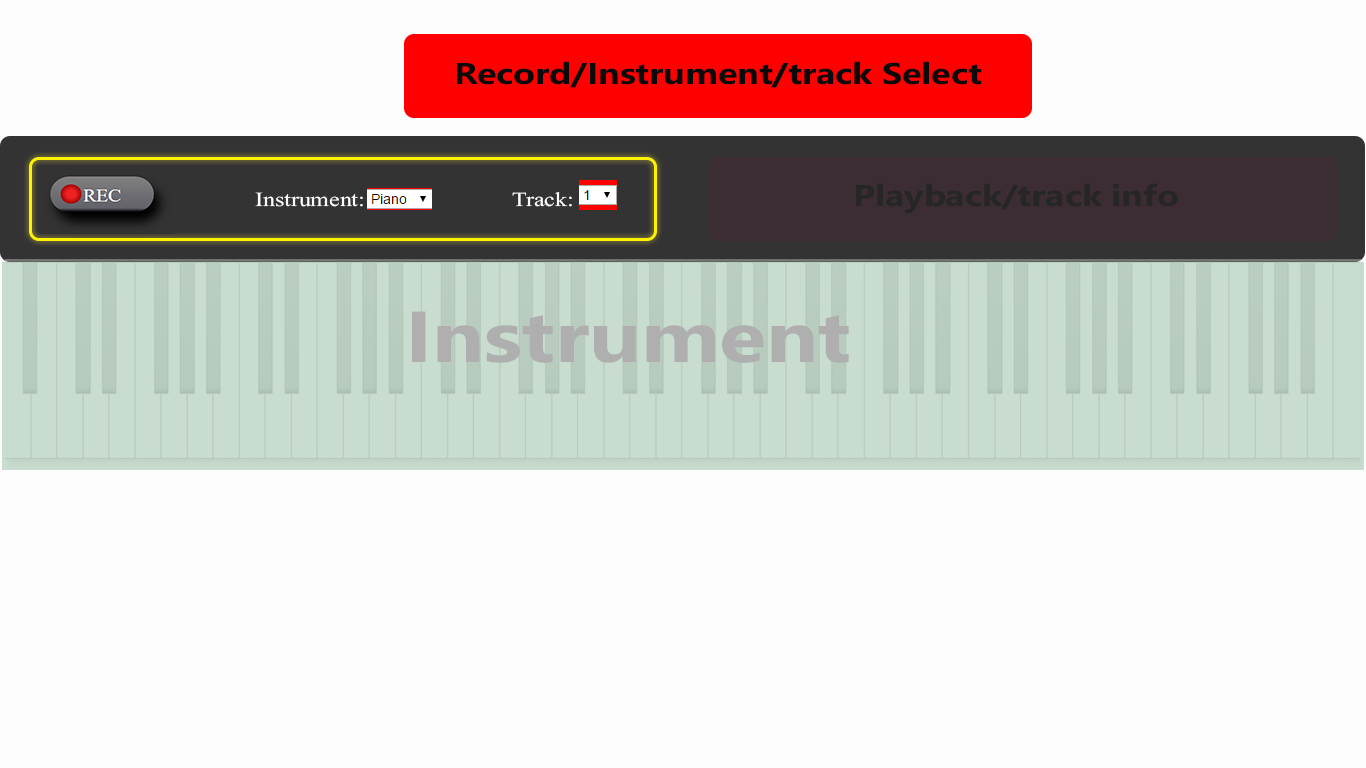
<style>
.page{position:relative;width:1366px;height:768px;background:#fdfdfd}
.page>*{position:absolute;margin:0}
.t1{font:30px "SegoeWP-Bold";letter-spacing:-0.005em;color:#0a0a0a;scale:1.2 1}
.t2{font:30px "SegoeWP-Bold";letter-spacing:-0.005em;color:#262626;scale:1.2 1}
.t3{font:30px "MicrosoftHimalaya";letter-spacing:-0.005em;color:#fffefe;scale:1.2 1}
.t4{font:72px "SegoeWP-Bold";letter-spacing:-0.005em;color:#afafaf;scale:1.2 1}
</style>
<div class="page">
<p class="t1" style="left:457px;top:61px;width:525px;height:27px">Record/Instrument/track Select</p>
<p class="t2" style="left:856px;top:183px;width:322px;height:30px">Playback/track info</p>
<p class="t3" style="left:255px;top:192px;width:108px;height:15px">Instrument:</p>
<p class="t3" style="left:512px;top:192px;width:60px;height:15px">Track:</p>
<p class="t4" style="left:412px;top:311px;width:437px;height:52px">Instrument</p>
</div>
